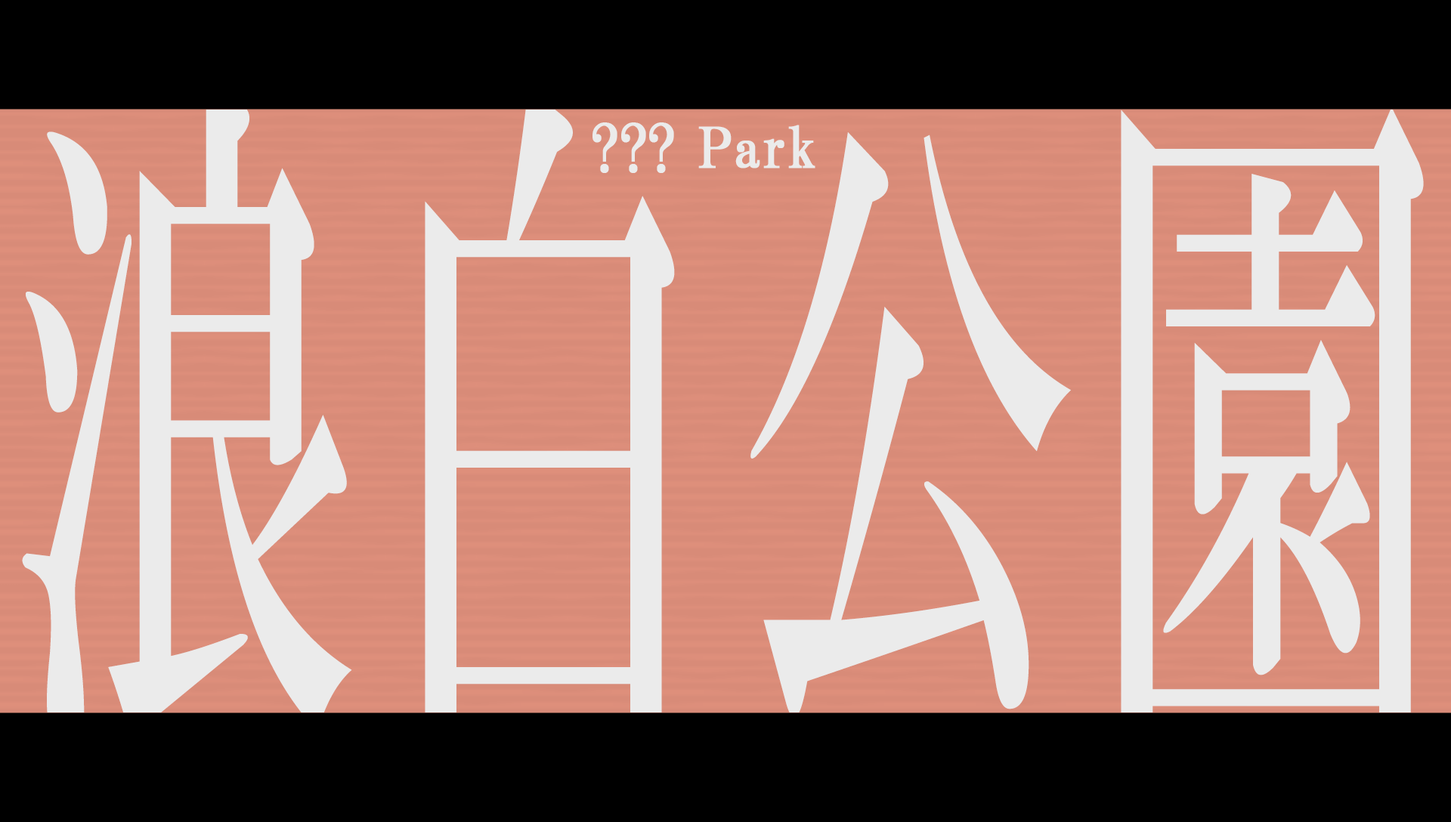
<style>
.page{position:relative;width:1451px;height:822px;background:#000000}
.page>*{position:absolute;margin:0}
.t1{font:709.4px "HGMinchoB";letter-spacing:0.04em;color:#ebebeb;scale:0.49 1}
.t2{font:55.4px "HGPMinchoB";letter-spacing:0.01em;color:#ebebeb;font-weight:bold}
</style>
<div class="page">
<p class="t1" style="left:22px;top:88px;width:1401px;height:668px">浪白公園</p>
<p class="t2" style="left:592px;top:122px;width:223px;height:51px">??? Park</p>
</div>
